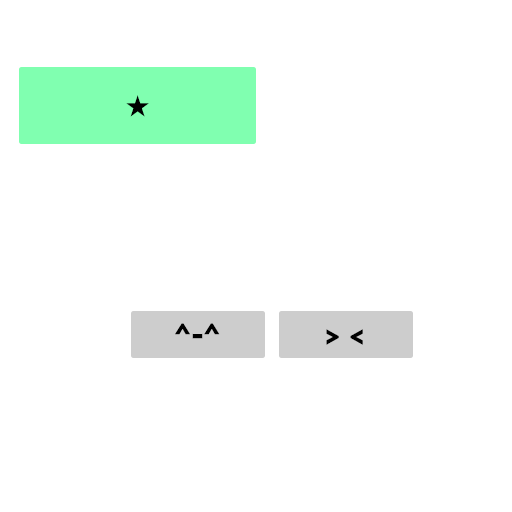
<style>
.page{position:relative;width:512px;height:512px;background:#ffffff}
.page>*{position:absolute;margin:0}
.t1{font:24px "KozGoPr6N-Regular";letter-spacing:0.05em;color:#000000}
.t2{font:24px "HiraginoSans-W8";letter-spacing:0.05em;color:#000000}
</style>
<div class="page">
<p class="t1" style="left:126px;top:95px;width:23px;height:22px">★</p>
<p class="t2" style="left:175px;top:323px;width:45px;height:16px">^-^</p>
<p class="t2" style="left:326px;top:329px;width:37px;height:16px">&gt; &lt;</p>
</div>
